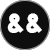
<style>
.page{position:relative;width:50px;height:50px;background:#0e0e0e}
.page>*{position:absolute;margin:0}
.t1{font:26px "TheBoldFont";color:#ffffff}
</style>
<div class="page">
<p class="t1" style="left:7px;top:13px;width:35px;height:20px">&amp;&amp;</p>
</div>
